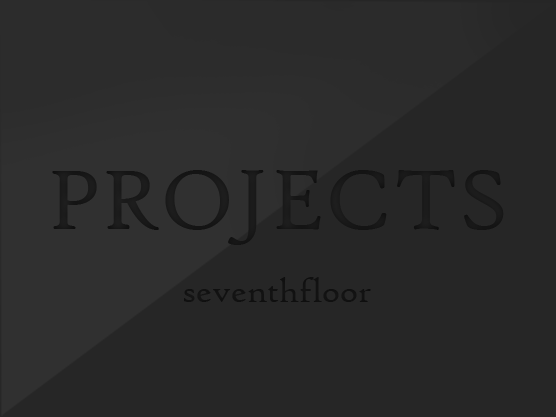
<style>
.page{position:relative;width:556px;height:417px;background:#262626}
.page>*{position:absolute;margin:0}
.t1{font:90.3px "HighTowerText-Reg";color:#262626}
.t2{font:36.1px "HighTowerText-Reg";color:#262626}
</style>
<div class="page">
<p class="t1" style="left:52px;top:170px;width:452px;height:75px">PROJECTS</p>
<p class="t2" style="left:184px;top:277px;width:187px;height:25px">seventhfloor</p>
</div>
